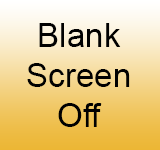
<style>
.page{position:relative;width:160px;height:150px}
.page>*{position:absolute;margin:0}
.t1{font:33.3px "ArialMT";color:#010101}
</style>
<div class="page">
<p class="t1" style="left:27px;top:23px;width:103px;height:104px;text-align:center">Blank<br>Screen<br>Off</p>
</div>
